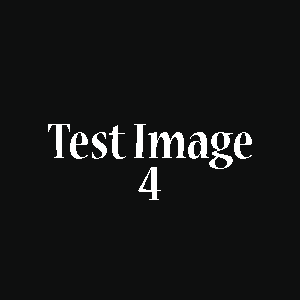
<style>
.page{position:relative;width:300px;height:300px;background:#0e0f0f}
.page>*{position:absolute;margin:0}
.t1{font:55.6px/41.7px "NuevaStd-BoldCond";color:#ffffff}
</style>
<div class="page">
<p class="t1" style="left:48px;top:124px;width:204px;height:76px;text-align:center">Test Image<br>4</p>
</div>
